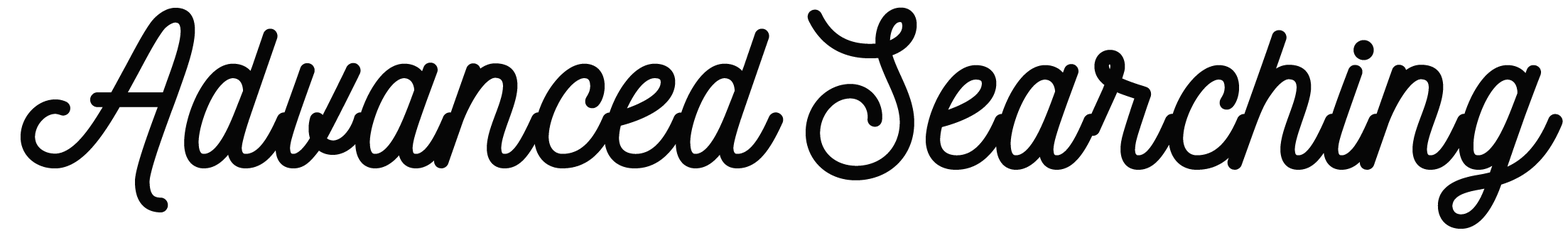
<style>
.page{position:relative;width:1568px;height:233px;background:#ffffff}
.page>*{position:absolute;margin:0}
.t1{font:209.3px "Nickainley-Normal";color:#060606;font-weight:bold}
</style>
<div class="page">
<p class="t1" style="left:21px;top:8px;width:763px;height:204px">Advanced</p>
<p class="t1" style="left:806px;top:7px;width:757px;height:222px">Searching</p>
</div>
